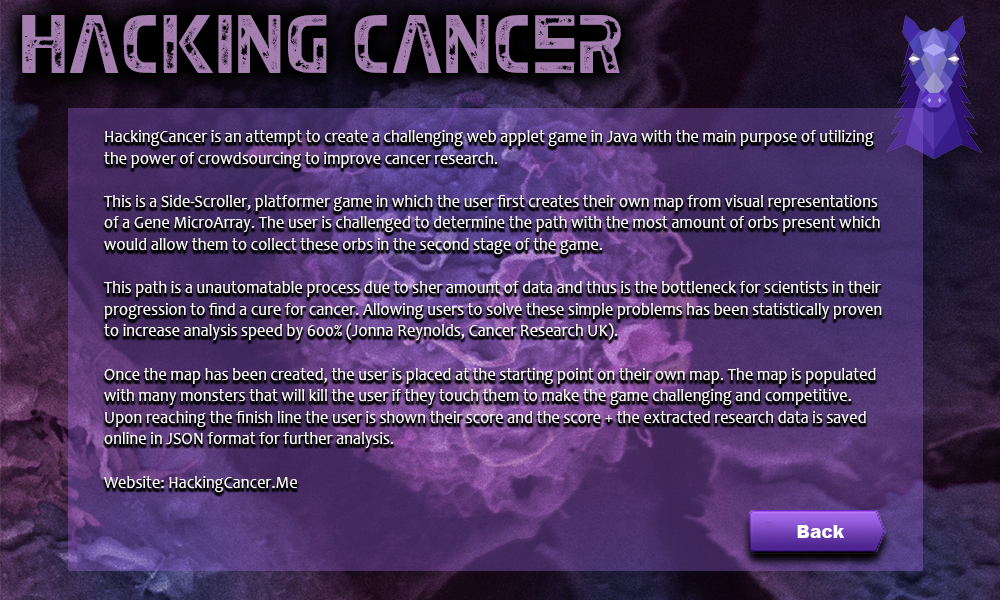
<style>
.page{position:relative;width:1000px;height:600px}
.page>*{position:absolute;margin:0}
.t1{font:75px "EarthKid";color:#a57fb0}
.t2{font:18px "Candara";color:#ffffff;scale:0.91 1}
.t3{font:17.6px "Arial-Black";color:#ffffff}
</style>
<div class="page">
<p class="t1" style="left:22px;top:15px;width:599px;height:58px">Hacking Cancer</p>
<p class="t2" style="left:104px;top:130px;width:778px;height:362px">HackingCancer is an attempt to create a challenging web applet game in Java with the main purpose of utilizing the power of crowdsourcing to improve cancer research.<br><br>This is a Side-Scroller, platformer game in which the user first creates their own map from visual representations of a Gene MicroArray. The user is challenged to determine the path with the most amount of orbs present which would allow them to collect these orbs in the second stage of the game. <br><br>This path is a unautomatable process due to sher amount of data and thus is the bottleneck for scientists in their progression to find a cure for cancer. Allowing users to solve these simple problems has been statistically proven to increase analysis speed by 600% (Jonna Reynolds, Cancer Research UK).<br><br>Once the map has been created, the user is placed at the starting point on their own map. The map is populated with many monsters that will kill the user if they touch them to make the game challenging and competitive. Upon reaching the finish line the user is shown their score and the score + the extracted research data is saved online in JSON format for further analysis. <br><br>Website: HackingCancer.Me</p>
<p class="t3" style="left:797px;top:525px;width:47px;height:13px">Back</p>
</div>
